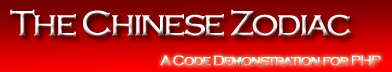
<style>
.page{position:relative;width:392px;height:72px}
.page>*{position:absolute;margin:0}
.t1{font:36px "CopperplateGothic-Light";letter-spacing:-0.08em;color:#fefdfd;font-weight:bold}
.t2{font:14px "CopperplateGothic-Light";letter-spacing:-0.08em;font-weight:bold}
</style>
<div class="page">
<p class="t1" style="left:10px;top:9px;width:341px;height:28px">The Chinese Zodiac</p>
<p class="t2" style="left:160px;top:55px;width:221px;height:11px">A Code Demonstration for PHP</p>
</div>
